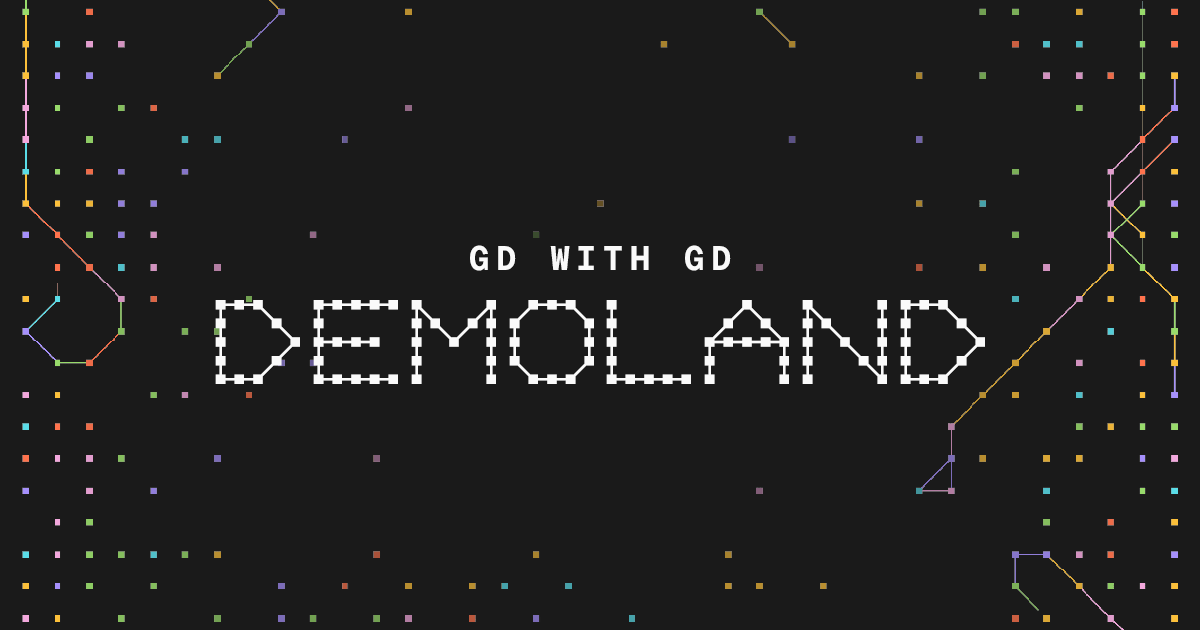
<style>
.page{position:relative;width:1200px;height:630px;background:#1a1a1a}
.page>*{position:absolute;margin:0}
.t1{font:33.7px "GeistMono-Bold";letter-spacing:0.2em;color:#fafafa}
.t2{font:139.9px "TMTDEMOLAND-Medium";letter-spacing:-0.1em;color:#fafafa}
</style>
<div class="page">
<p class="t1" style="left:470px;top:245px;width:261px;height:26px">GD WITH GD</p>
<p class="t2" style="left:215px;top:300px;width:770px;height:84px">DEMOLAND</p>
</div>
